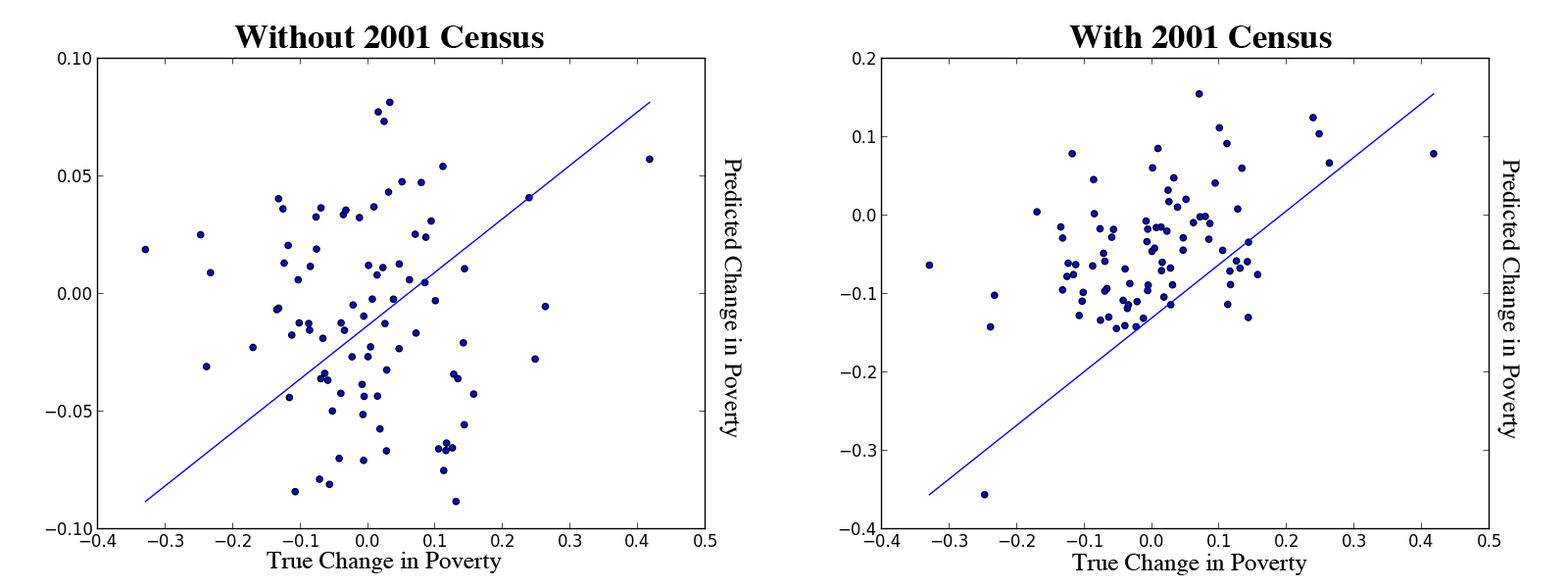
<style>
.page{position:relative;width:1568px;height:588px;background:#ffffff}
.page>*{position:absolute;margin:0}
.t1{font:34px "Times-Bold";color:#000000}
.t2{font:24.5px "Times-Roman";color:#000000}
</style>
<div class="page">
<p class="t1" style="left:234px;top:25px;width:310px;height:23px">Without 2001 Census</p>
<p class="t1" style="left:1069px;top:25px;width:263px;height:23px">With 2001 Census</p>
<p class="t2" style="left:719px;top:158px;width:23px;height:280px;rotate:90deg">Predicted Change in Poverty</p>
<p class="t2" style="left:1497px;top:159px;width:23px;height:280px;rotate:90deg">Predicted Change in Poverty</p>
<p class="t2" style="left:267px;top:552px;width:235px;height:21px">True Change in Poverty</p>
<p class="t2" style="left:1072px;top:554px;width:235px;height:21px">True Change in Poverty</p>
</div>
